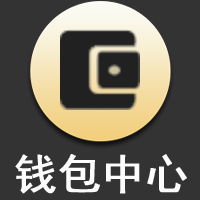
<style>
.page{position:relative;width:200px;height:200px;background:#333333}
.page>*{position:absolute;margin:0}
.t1{font:42.3px "SimHei";color:#fcfcfc;font-weight:bold}
</style>
<div class="page">
<p class="t1" style="left:15px;top:154px;width:172px;height:40px">钱包中心</p>
</div>
